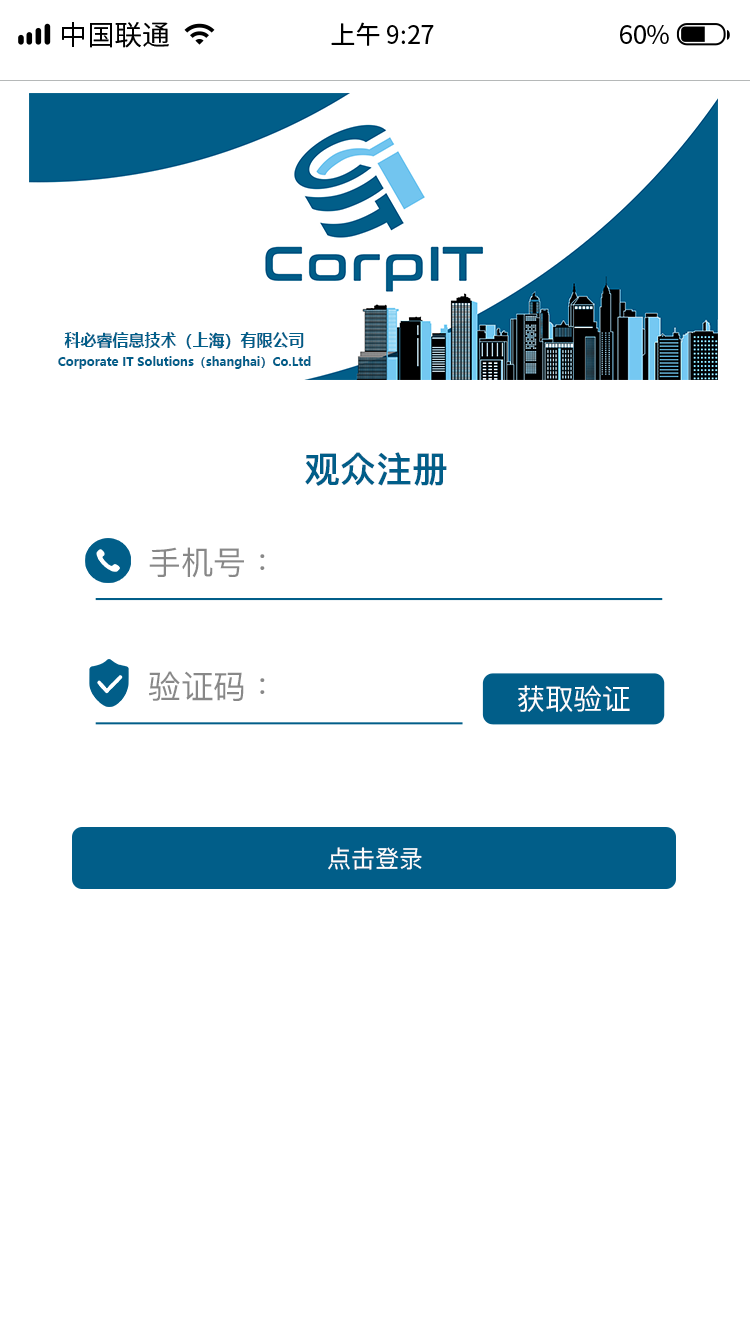
<style>
.page{position:relative;width:750px;height:1334px;background:#ffffff}
.page>*{position:absolute;margin:0}
.t1{font:27.8px "SourceHanSansCN-Regular";color:#000000}
.t2{font:25px "SourceHanSansCN-Regular";color:#000000}
.t3{font:12px/20px "MicrosoftYaHei-Bold";color:#015e89}
.t4{font:16px/20px "MicrosoftYaHei-Bold";color:#015e89}
.t5{font:36px "PingFangTC-Semibold";color:#015e89}
.t6{font:32.6px "PingFangTC";color:#888888}
.t7{font:28.5px "PingFangTC";color:#fefefe}
.t8{font:24px "PingFangTC";color:#fefefe}
</style>
<div class="page">
<p class="t1" style="left:62px;top:22px;width:107px;height:26px">中国联通</p>
<p class="t2" style="left:331px;top:22px;width:103px;height:24px">上午 9:27</p>
<p class="t2" style="left:620px;top:25px;width:49px;height:19px">60%</p>
<p class="t3" style="left:58px;top:332px;width:253px;height:37px;text-align:center"><span class="t4">科必睿信息技术（上海）有限公司<br></span>Corporate IT Solutions（shanghai）Co.Ltd</p>
<p class="t5" style="left:305px;top:452px;width:142px;height:34px">观众注册</p>
<p class="t6" style="left:149px;top:547px;width:116px;height:31px">🈐机号：</p>
<p class="t6" style="left:149px;top:671px;width:116px;height:30px">验证码：</p>
<p class="t7" style="left:518px;top:685px;width:112px;height:27px">获取验证</p>
<p class="t8" style="left:328px;top:847px;width:94px;height:23px">点击登录</p>
</div>
